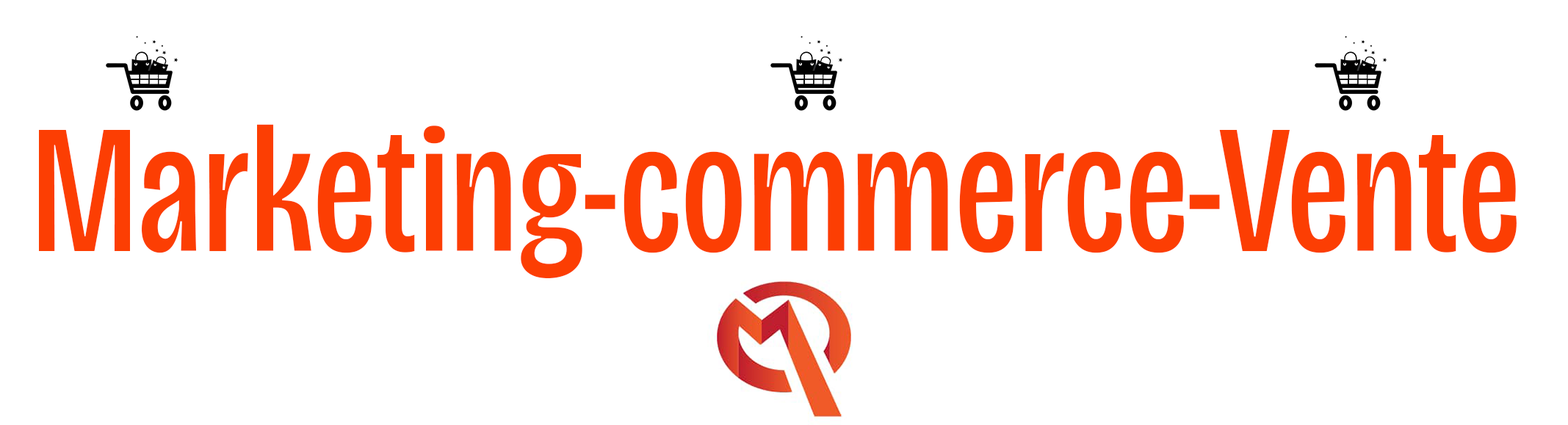
<style>
.page{position:relative;width:1568px;height:425px;background:#ffffff}
.page>*{position:absolute;margin:0}
.t1{font:183.6px "BricolageGrotesque72ptCondensed-Regular";color:#fc3e03}
</style>
<div class="page">
<p class="t1" style="left:39px;top:124px;width:1478px;height:154px">Marketing-commerce-Vente</p>
</div>
